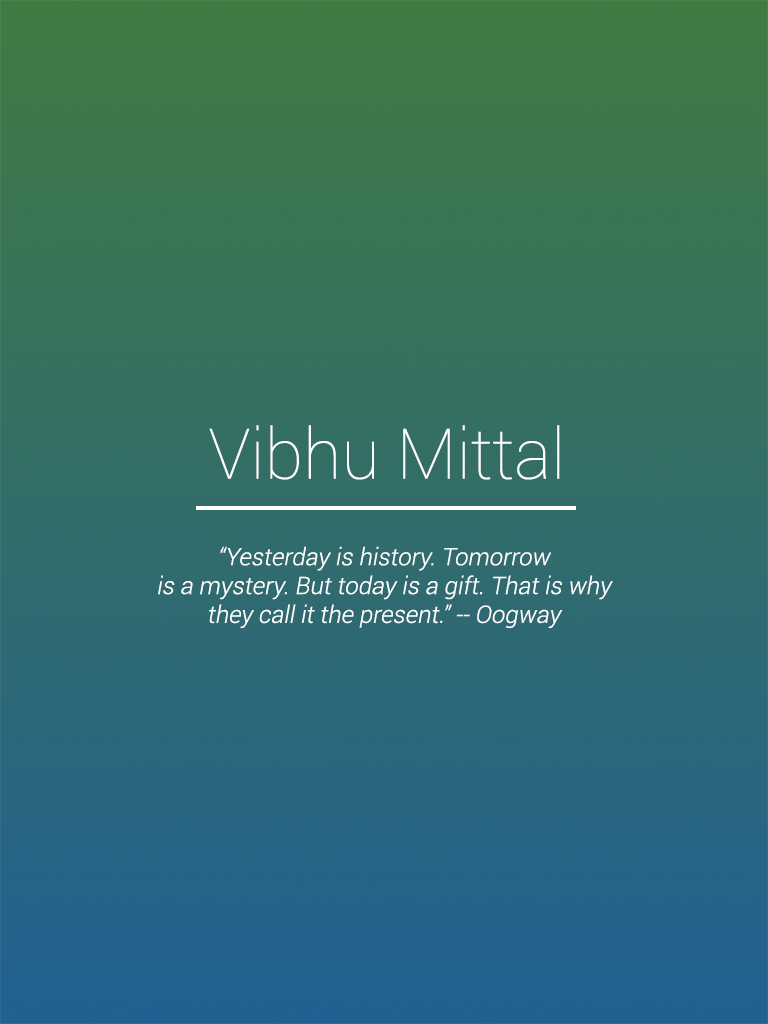
<style>
.page{position:relative;width:768px;height:1024px}
.page>*{position:absolute;margin:0}
.t1{font:70px "Roboto-Thin";color:#ffffff}
.t2{font:24px "Roboto-Light";color:#ffffff;font-style:italic}
</style>
<div class="page">
<p class="t1" style="left:209px;top:425px;width:351px;height:55px">Vibhu Mittal</p>
<p class="t2" style="left:158px;top:546px;width:455px;height:82px;text-align:center">“Yesterday is history. Tomorrow<br>is a mystery. But today is a gift. That is why<br>they call it the present.” -- Oogway</p>
</div>
